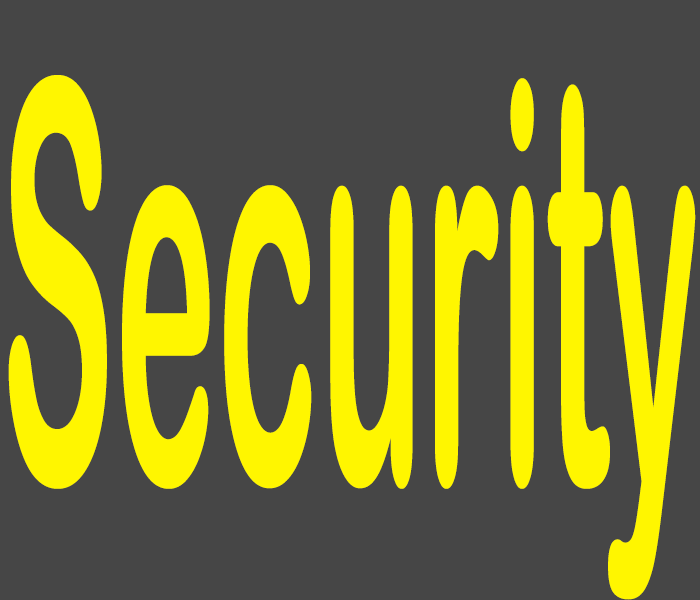
<style>
.page{position:relative;width:700px;height:600px;background:#464646}
.page>*{position:absolute;margin:0}
.t1{font:558.9px "ArialRoundedMTBold";color:#fff600;scale:0.31 1}
</style>
<div class="page">
<p class="t1" style="left:8px;top:75px;width:688px;height:525px">Security</p>
</div>
